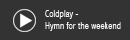
<style>
.page{position:relative;width:130px;height:40px;background:#333333}
.page>*{position:absolute;margin:0}
.t1{font:10.5px "AbadiMT-CondensedLight";color:#ffffff}
</style>
<div class="page">
<p class="t1" style="left:45px;top:10px;width:76px;height:21px">Coldplay - <br>Hymn for the weekend</p>
</div>
